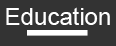
<style>
.page{position:relative;width:116px;height:46px;background:#333333}
.page>*{position:absolute;margin:0}
.t1{font:24px "ArialMT";color:#ffffff}
</style>
<div class="page">
<p class="t1" style="left:6px;top:7px;width:104px;height:18px">Education</p>
</div>
